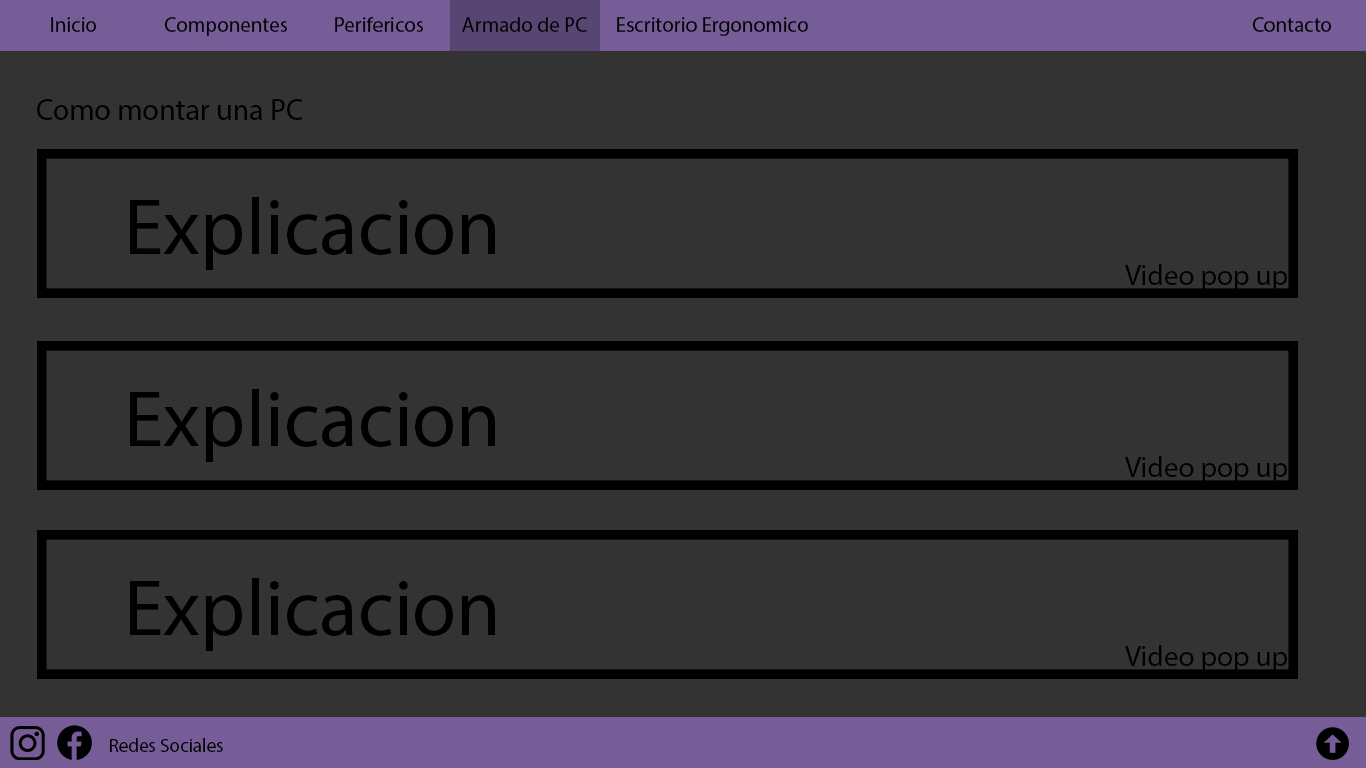
<style>
.page{position:relative;width:1366px;height:768px;background:#333333}
.page>*{position:absolute;margin:0}
.t1{font:21px "MyriadPro-Regular";color:#000000}
.t2{font:30px "MyriadPro-Regular";color:#000000}
.t3{font:80px "MyriadPro-Regular";color:#000000}
.t4{font:29px "MyriadPro-Regular";color:#000000}
.t5{font:19px "MyriadPro-Regular";color:#000000}
</style>
<div class="page">
<p class="t1" style="left:51px;top:17px;width:46px;height:15px">Inicio</p>
<p class="t1" style="left:164px;top:17px;width:123px;height:19px">Componentes</p>
<p class="t1" style="left:335px;top:17px;width:88px;height:15px">Perifericos</p>
<p class="t1" style="left:462px;top:17px;width:125px;height:15px">Armado de PC</p>
<p class="t1" style="left:617px;top:17px;width:191px;height:19px">Escritorio Ergonomico</p>
<p class="t1" style="left:1252px;top:17px;width:80px;height:15px">Contacto</p>
<p class="t2" style="left:37px;top:99px;width:266px;height:21px">Como montar una PC</p>
<p class="t3" style="left:130px;top:197px;width:365px;height:73px">Explicacion</p>
<p class="t4" style="left:1125px;top:264px;width:162px;height:27px">Video pop up</p>
<p class="t3" style="left:130px;top:389px;width:365px;height:73px">Explicacion</p>
<p class="t4" style="left:1125px;top:456px;width:162px;height:27px">Video pop up</p>
<p class="t3" style="left:130px;top:578px;width:365px;height:73px">Explicacion</p>
<p class="t4" style="left:1125px;top:645px;width:162px;height:27px">Video pop up</p>
<p class="t5" style="left:110px;top:738px;width:113px;height:14px">Redes Sociales</p>
</div>
